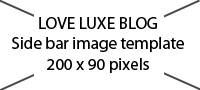
<style>
.page{position:relative;width:200px;height:90px;background:#ffffff}
.page>*{position:absolute;margin:0}
.t1{font:17px "MyriadPro-Regular";color:#000000}
</style>
<div class="page">
<p class="t1" style="left:12px;top:17px;width:172px;height:56px;text-align:center">LOVE LUXE BLOG<br>Side bar image template<br>200 x 90 pixels</p>
</div>
